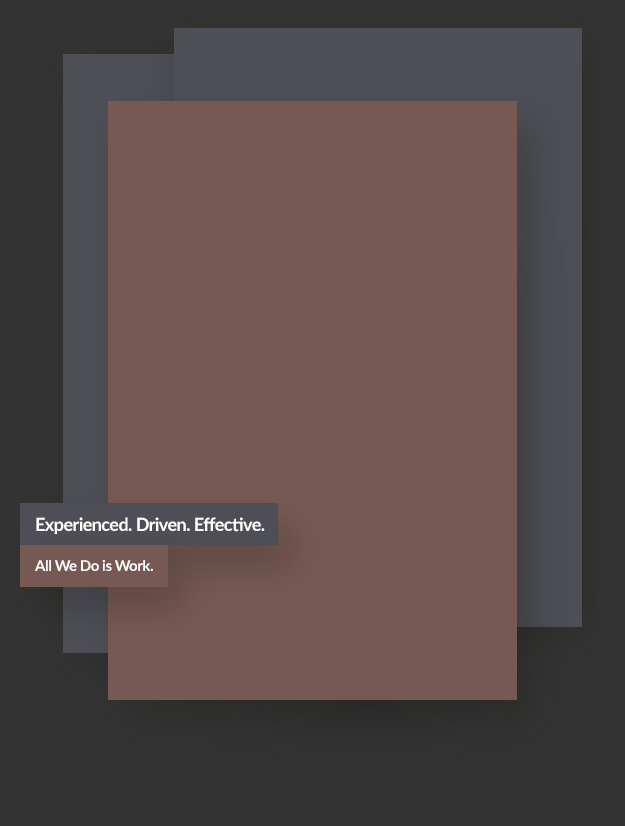
<style>
.page{position:relative;width:625px;height:826px;background:#765952}
.page>*{position:absolute;margin:0}
.t1{font:18px "Lato-Bold";letter-spacing:-0.03em;color:#ffffff}
.t2{font:15px "Lato-Bold";letter-spacing:-0.03em;color:#ffffff}
</style>
<div class="page">
<p class="t1" style="left:36px;top:517px;width:229px;height:17px">Experienced. Driven. Effective.</p>
<p class="t2" style="left:35px;top:560px;width:118px;height:11px">All We Do is Work.</p>
</div>
